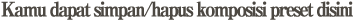
<style>
.page{position:relative;width:363px;height:21px;background:#ffffff}
.page>*{position:absolute;margin:0}
.t1{font:20px "RyuminPro-ExBold";letter-spacing:-0.12em;color:#4c4842;font-weight:bold;scale:0.9 1}
</style>
<div class="page">
<p class="t1" style="left:1px;top:1px;width:352px;height:19px">Kamu dapat simpan/hapus komposisi preset disini</p>
</div>
